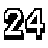
<style>
.page{position:relative;width:48px;height:48px;background:#ffffff}
.page>*{position:absolute;margin:0}
.t1{font:36px "KarmaFuture-Regular";color:#010101}
</style>
<div class="page">
<p class="t1" style="left:4px;top:8px;width:41px;height:32px">24</p>
</div>
